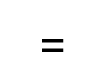
<style>
.page{position:relative;width:105px;height:83px;background:#ffffff}
.page>*{position:absolute;margin:0}
.t1{font:47.9px "DroidSans";color:#000000}
</style>
<div class="page">
<p class="t1" style="left:42px;top:39px;width:22px;height:13px">=</p>
</div>
